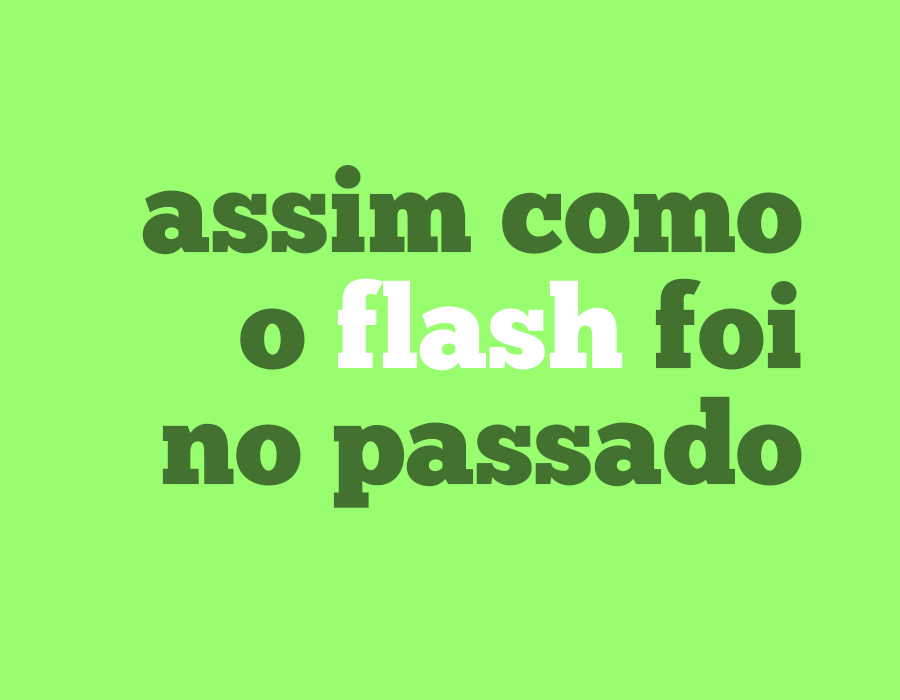
<style>
.page{position:relative;width:900px;height:700px;background:#98fd6f}
.page>*{position:absolute;margin:0}
.t1{font:116.3px/116.3px "ChunkFive-Roman";color:#437230}
.t2{font:116.3px/116.3px "ChunkFive-Roman";color:#ffffff}
</style>
<div class="page">
<p class="t1" style="left:142px;top:165px;width:660px;height:343px;text-align:right">assim como<br>o <span class="t2">flash</span> foi<br>no passado</p>
</div>
